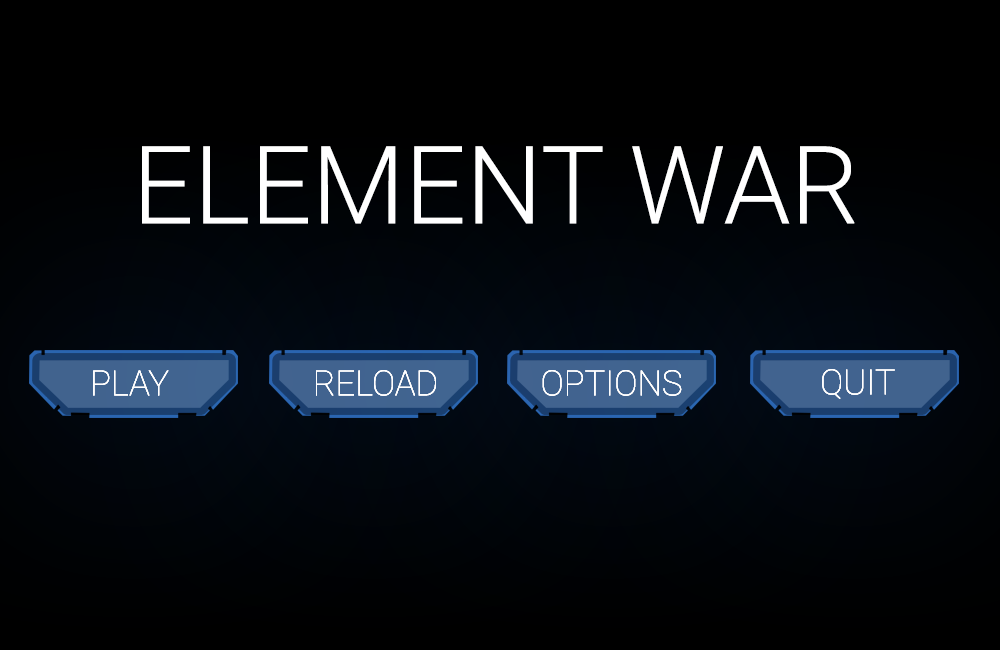
<style>
.page{position:relative;width:1000px;height:650px;background:#000000}
.page>*{position:absolute;margin:0}
.t1{font:108px "Roboto-Light";color:#ffffff}
.t2{font:34.8px "Roboto-Thin";color:#ffffff}
</style>
<div class="page">
<p class="t1" style="left:142px;top:146px;width:713px;height:78px">ELEMENT WAR</p>
<p class="t2" style="left:93px;top:370px;width:76px;height:26px">PLAY</p>
<p class="t2" style="left:93px;top:370px;width:76px;height:26px">PLAY</p>
<p class="t2" style="left:93px;top:370px;width:76px;height:26px">PLAY</p>
<p class="t2" style="left:316px;top:370px;width:120px;height:26px">RELOAD</p>
<p class="t2" style="left:316px;top:370px;width:120px;height:26px">RELOAD</p>
<p class="t2" style="left:316px;top:370px;width:120px;height:26px">RELOAD</p>
<p class="t2" style="left:542px;top:370px;width:140px;height:26px">OPTIONS</p>
<p class="t2" style="left:542px;top:370px;width:140px;height:26px">OPTIONS</p>
<p class="t2" style="left:542px;top:370px;width:140px;height:26px">OPTIONS</p>
<p class="t2" style="left:822px;top:369px;width:73px;height:30px">QUIT</p>
<p class="t2" style="left:822px;top:369px;width:73px;height:30px">QUIT</p>
<p class="t2" style="left:822px;top:369px;width:73px;height:30px">QUIT</p>
</div>
